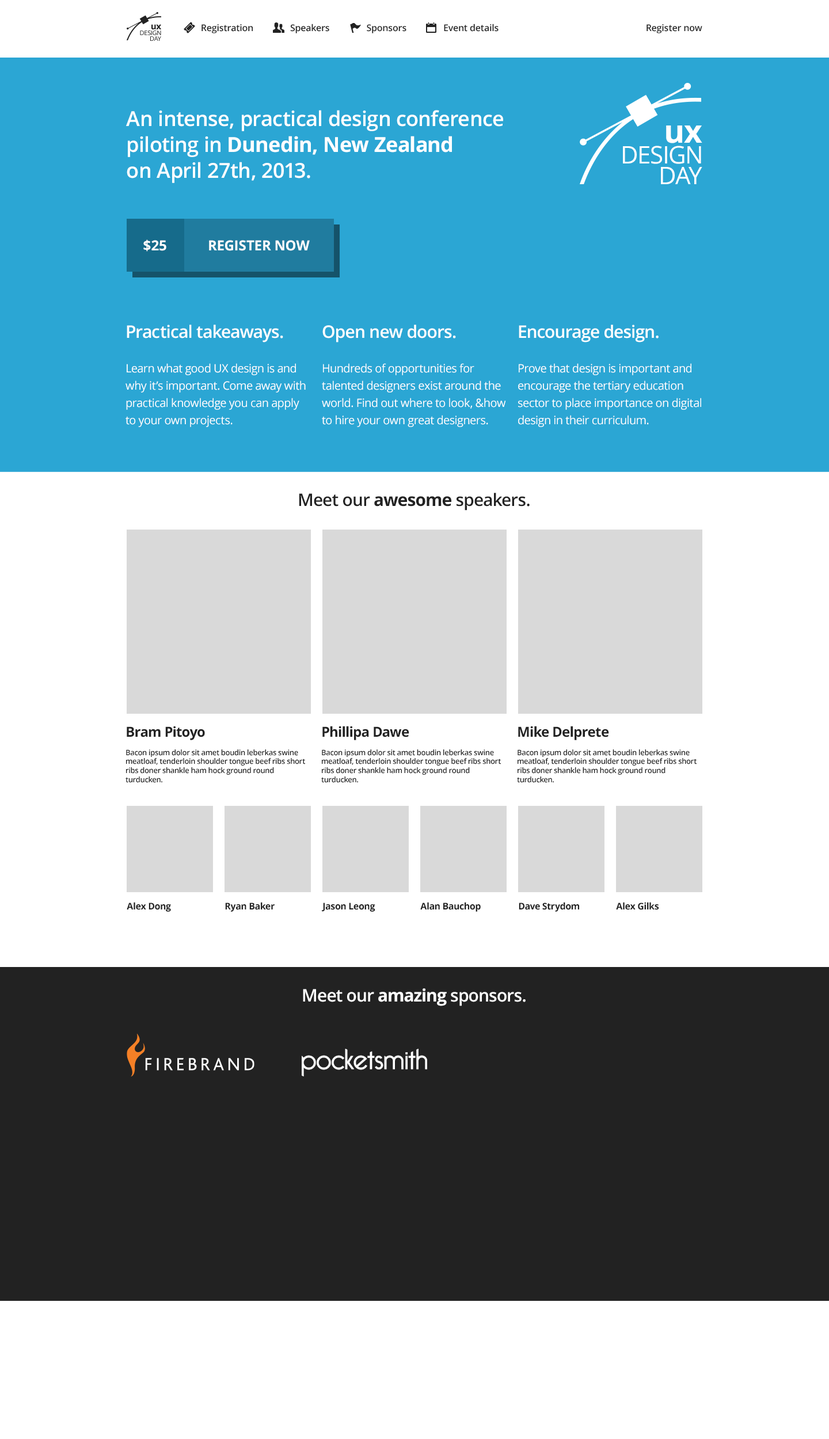
<style>
.page{position:relative;width:829px;height:1439px;background:#ffffff}
.page>*{position:absolute;margin:0}
.t1{font:8.6px "OpenSans-Bold";letter-spacing:-0.025em;color:#222222}
.t2{font:9.2px "OpenSans-Semibold";letter-spacing:-0.01em;color:#222222}
.t3{font:6.3px "OpenSans";letter-spacing:-0.025em}
.t4{font:6.3px "OpenSans";letter-spacing:-0.025em;color:#222222}
.t5{font:20.7px/25.9px "OpenSans-Semibold";letter-spacing:-0.01em;color:#ffffff}
.t6{font:20.7px/25.9px "OpenSans-Bold";letter-spacing:-0.01em;color:#ffffff}
.t7{font:31.7px "OpenSans-Bold";letter-spacing:-0.025em;color:#ffffff}
.t8{font:24.2px "OpenSans";letter-spacing:-0.025em;color:#ffffff}
.t9{font:13.8px "OpenSans-Bold";letter-spacing:-0.01em;color:#ffffff}
.t10{font:11.5px/17.3px "OpenSans";letter-spacing:-0.025em;color:#ffffff}
.t11{font:17.3px/11.5px "OpenSans-Semibold";letter-spacing:-0.025em;color:#ffffff}
.t12{font:17.3px "OpenSans-Semibold";letter-spacing:-0.025em;color:#222222}
.t13{font:17.3px "OpenSans-Bold";letter-spacing:-0.025em;color:#222222}
.t14{font:13.8px "OpenSans-Bold";letter-spacing:-0.025em;color:#222222}
.t15{font:7.5px "OpenSans-Semibold";letter-spacing:-0.025em;color:#222222}
.t16{font:9.2px "OpenSans-Bold";letter-spacing:-0.025em;color:#222222}
.t17{font:17.3px "OpenSans-Semibold";letter-spacing:-0.025em;color:#ffffff}
.t18{font:17.3px "OpenSans-Bold";letter-spacing:-0.025em;color:#ffffff}
</style>
<div class="page">
<p class="t1" style="left:151px;top:24px;width:10px;height:6px">ux</p>
<p class="t2" style="left:201px;top:24px;width:297px;height:9px">Registration                Speakers                Sponsors                Event details</p>
<p class="t2" style="left:646px;top:24px;width:56px;height:9px">Register now</p>
<p class="t3" style="left:140px;top:31px;width:21px;height:4px">DESIGN</p>
<p class="t4" style="left:150px;top:36px;width:11px;height:5px">DAY</p>
<p class="t5" style="left:126px;top:110px;width:377px;height:73px">An intense, practical design conference <br>piloting in <span class="t6">Dunedin, New Zealand</span> <br>on April 27th, 2013.</p>
<p class="t7" style="left:666px;top:125px;width:36px;height:18px">ux</p>
<p class="t8" style="left:623px;top:146px;width:78px;height:18px">DESIGN</p>
<p class="t8" style="left:661px;top:167px;width:41px;height:17px">DAY</p>
<p class="t9" style="left:143px;top:239px;width:23px;height:13px">$25</p>
<p class="t9" style="left:209px;top:240px;width:101px;height:11px">REGISTER NOW</p>
<p class="t10" style="left:125px;top:325px;width:181px;height:102px"><span class="t11">Practical takeaways.<br><br></span>Learn what good UX design is and why it’s important. Come away with practical knowledge you can apply to your own projects.</p>
<p class="t10" style="left:322px;top:325px;width:184px;height:102px"><span class="t11">Open new doors.<br><br></span>Hundreds of opportunities for talented designers exist around the world. Find out where to look, &amp;how to hire your own great designers.</p>
<p class="t10" style="left:518px;top:325px;width:183px;height:102px"><span class="t11">Encourage design.<br><br></span>Prove that design is important and encourage the tertiary education sector to place importance on digital design in their curriculum.</p>
<p class="t12" style="left:299px;top:493px;width:230px;height:17px">Meet our <span class="t13">awesome </span>speakers.</p>
<p class="t14" style="left:127px;top:726px;width:78px;height:14px">Bram Pitoyo</p>
<p class="t14" style="left:322px;top:726px;width:87px;height:14px">Phillipa Dawe</p>
<p class="t14" style="left:518px;top:726px;width:91px;height:14px">Mike Delprete</p>
<p class="t15" style="left:125px;top:749px;width:180px;height:34px">Bacon ipsum dolor sit amet boudin leberkas swine meatloaf, tenderloin shoulder tongue beef ribs short ribs doner shankle ham hock ground round turducken.</p>
<p class="t15" style="left:321px;top:749px;width:180px;height:34px">Bacon ipsum dolor sit amet boudin leberkas swine meatloaf, tenderloin shoulder tongue beef ribs short ribs doner shankle ham hock ground round turducken.</p>
<p class="t15" style="left:517px;top:749px;width:179px;height:34px">Bacon ipsum dolor sit amet boudin leberkas swine meatloaf, tenderloin shoulder tongue beef ribs short ribs doner shankle ham hock ground round turducken.</p>
<p class="t16" style="left:127px;top:902px;width:44px;height:10px">Alex Dong</p>
<p class="t16" style="left:225px;top:902px;width:50px;height:10px">Ryan Baker</p>
<p class="t16" style="left:322px;top:902px;width:53px;height:10px">Jason Leong</p>
<p class="t16" style="left:420px;top:902px;width:61px;height:10px">Alan Bauchop</p>
<p class="t16" style="left:519px;top:902px;width:60px;height:10px">Dave Strydom</p>
<p class="t16" style="left:616px;top:902px;width:43px;height:8px">Alex Gilks</p>
<p class="t17" style="left:303px;top:988px;width:222px;height:18px">Meet our <span class="t18">amazing </span>sponsors.</p>
</div>
